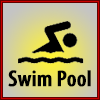
<style>
.page{position:relative;width:100px;height:100px}
.page>*{position:absolute;margin:0}
.t1{font:22.9px "MyriadPro-SemiboldCond";color:#000000;font-weight:bold}
</style>
<div class="page">
<p class="t1" style="left:8px;top:70px;width:83px;height:17px">Swim Pool</p>
</div>
